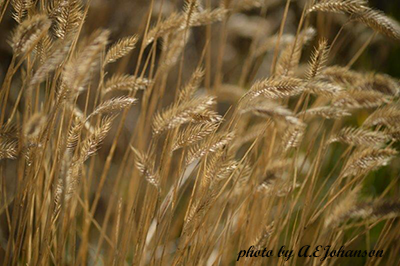
<style>
.page{position:relative;width:400px;height:266px}
.page>*{position:absolute;margin:0}
.t1{font:16.7px "ScriptMTBold";color:#050505;font-style:italic}
</style>
<div class="page">
<p class="t1" style="left:236px;top:245px;width:148px;height:17px">photo by A.EJohanson</p>
</div>
